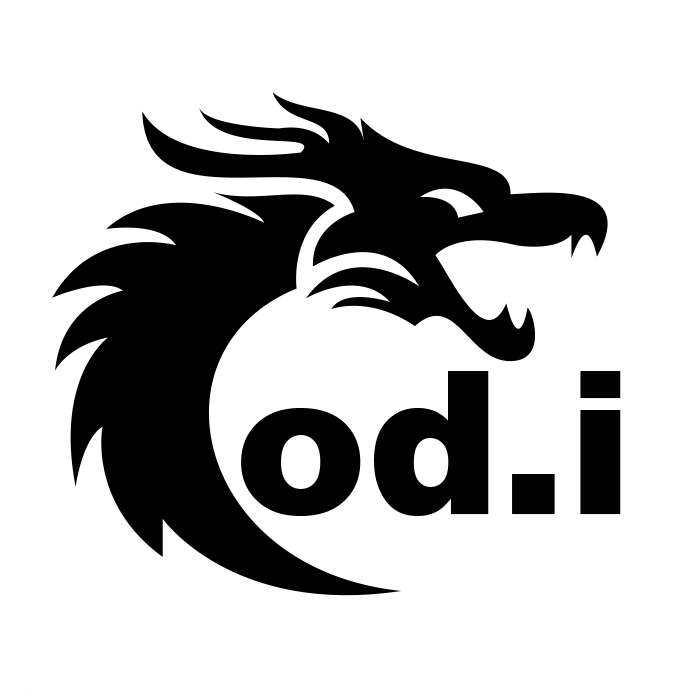
<style>
.page{position:relative;width:700px;height:700px;background:#ffffff}
.page>*{position:absolute;margin:0}
.t1{font:200px "Arial-Black";color:#010101}
</style>
<div class="page">
<p class="t1" style="left:241px;top:371px;width:380px;height:145px">od.i</p>
</div>
